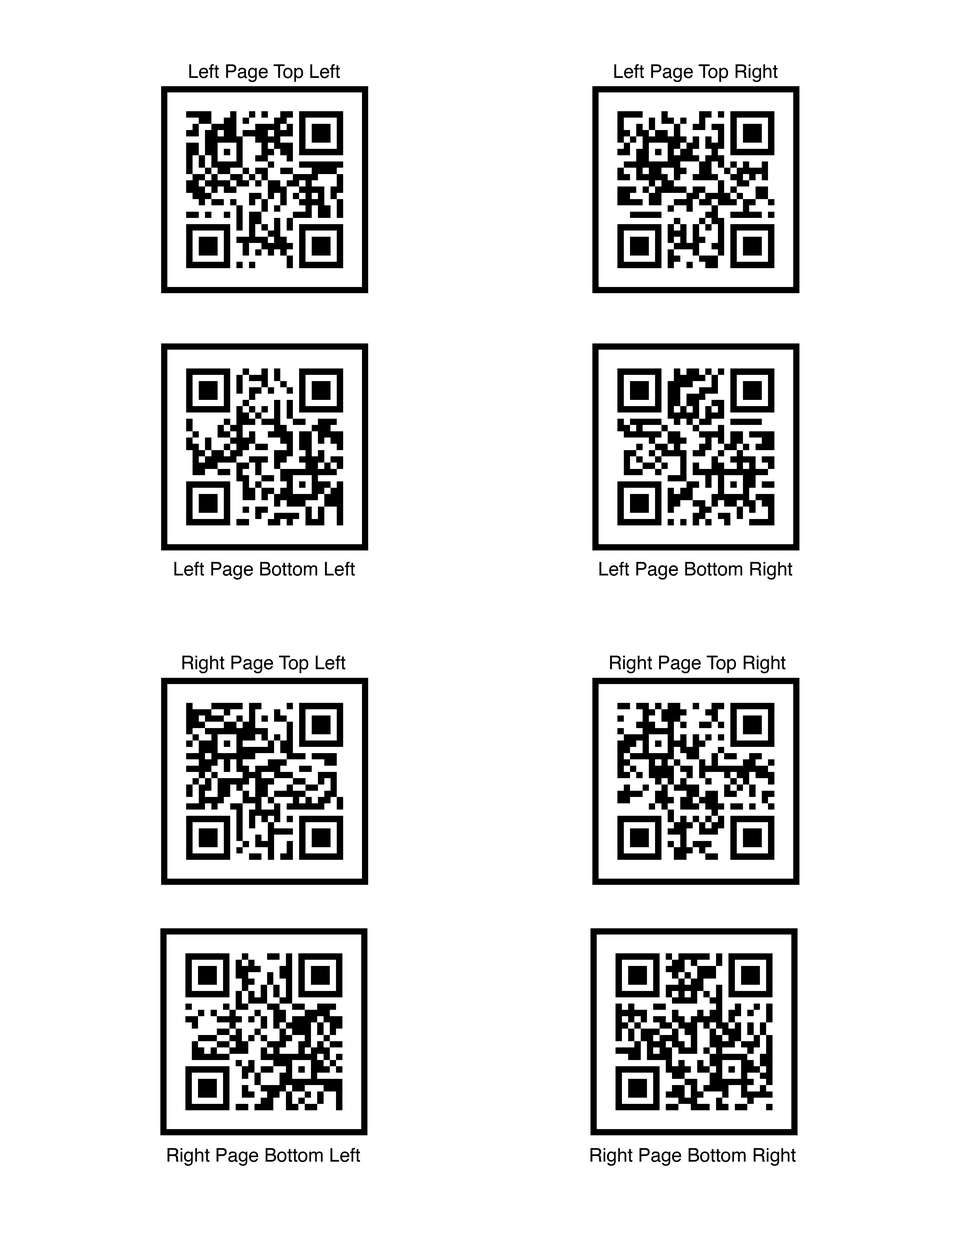
<style>
.page{position:relative;width:960px;height:1242px;background:#ffffff}
.page>*{position:absolute;margin:0}
.t1{font:18.8px "Helvetica";color:#000000}
</style>
<div class="page">
<p class="t1" style="left:189px;top:64px;width:151px;height:18px">Left Page Top Left</p>
<p class="t1" style="left:614px;top:64px;width:164px;height:18px">Left Page Top Right</p>
<p class="t1" style="left:174px;top:562px;width:181px;height:18px">Left Page Bottom Left</p>
<p class="t1" style="left:599px;top:562px;width:193px;height:18px">Left Page Bottom Right</p>
<p class="t1" style="left:182px;top:656px;width:163px;height:17px">Right Page Top Left</p>
<p class="t1" style="left:610px;top:656px;width:175px;height:17px">Right Page Top Right</p>
<p class="t1" style="left:168px;top:1148px;width:192px;height:18px">Right Page Bottom Left</p>
<p class="t1" style="left:590px;top:1148px;width:206px;height:18px">Right Page Bottom Right</p>
</div>
